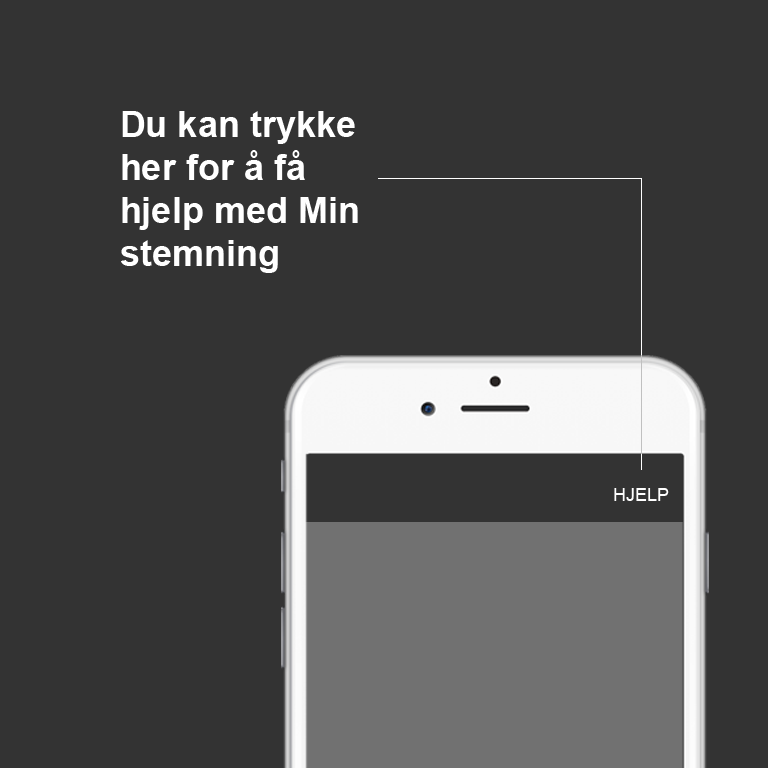
<style>
.page{position:relative;width:768px;height:768px;background:#333333}
.page>*{position:absolute;margin:0}
.t1{font:36px "Arial-BoldMT";color:#ffffff}
.t2{font:18px "ArialMT";color:#ffffff}
</style>
<div class="page">
<p class="t1" style="left:121px;top:111px;width:237px;height:162px">Du kan trykke her for å få hjelp med Min stemning</p>
<p class="t2" style="left:614px;top:488px;width:55px;height:13px">HJELP</p>
</div>
